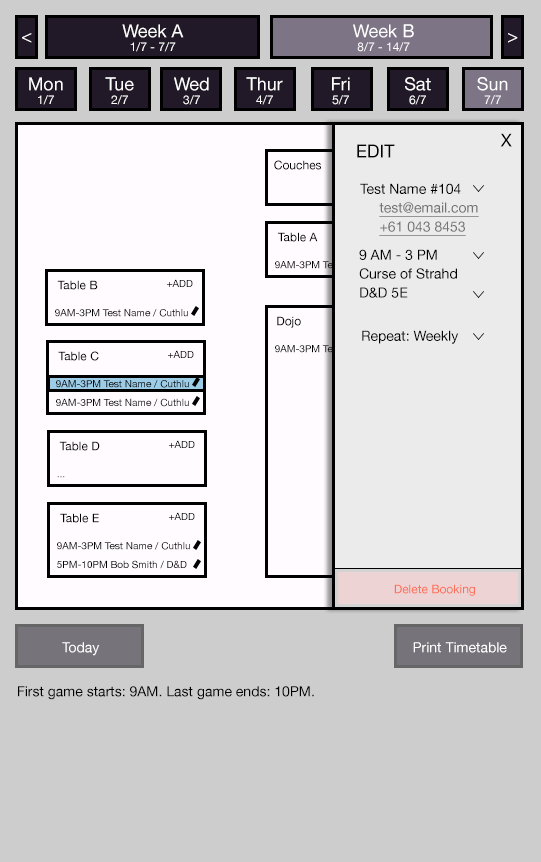
<style>
.page{position:relative;width:541px;height:862px;background:#cdcdcd}
.page>*{position:absolute;margin:0}
.t1{font:12px/13.9px "HelveticaNeue";color:#ffffff}
.t2{font:18px/13.9px "HelveticaNeue";color:#ffffff}
.t3{font:18px "HelveticaNeue";color:#ffffff}
.t4{font:18px "HelveticaNeue";color:#000000}
.t5{font:12px "HelveticaNeue";color:#000000}
.t6{font:14px/18.9px "HelveticaNeue";color:#737373;text-decoration:underline}
.t7{font:14px/18.9px "HelveticaNeue";color:#000000}
.t8{font:10px "HelveticaNeue";color:#000000}
.t9{font:14px "HelveticaNeue";color:#000000}
.t10{font:10px/18.9px "HelveticaNeue";color:#000000}
.t11{font:10px "HelveticaNeue"}
.t12{font:12px "HelveticaNeue";color:#fb7058}
.t13{font:14px "HelveticaNeue";color:#ffffff}
</style>
<div class="page">
<p class="t1" style="left:122px;top:24px;width:62px;height:28px;text-align:center"><span class="t2">Week A<br></span>1/7 - 7/7</p>
<p class="t1" style="left:353px;top:24px;width:61px;height:28px;text-align:center"><span class="t2">Week B<br></span>8/7 - 14/7</p>
<p class="t3" style="left:22px;top:33px;width:10px;height:10px">&lt;</p>
<p class="t3" style="left:508px;top:33px;width:10px;height:10px">&gt;</p>
<p class="t2" style="left:29px;top:77px;width:34px;height:28px;text-align:center">Mon<br><span class="t1">1/7</span></p>
<p class="t2" style="left:105px;top:77px;width:29px;height:28px;text-align:center">Tue<br><span class="t1">2/7</span></p>
<p class="t2" style="left:174px;top:77px;width:35px;height:28px;text-align:center">Wed<br><span class="t1">3/7</span></p>
<p class="t2" style="left:246px;top:77px;width:37px;height:28px;text-align:center">Thur<br><span class="t1">4/7</span></p>
<p class="t2" style="left:332px;top:77px;width:18px;height:28px;text-align:center">Fri<br><span class="t1">5/7</span></p>
<p class="t2" style="left:405px;top:77px;width:26px;height:28px;text-align:center">Sat<br><span class="t1">6/7</span></p>
<p class="t2" style="left:477px;top:77px;width:31px;height:28px;text-align:center">Sun<br><span class="t1">7/7</span></p>
<p class="t4" style="left:500px;top:133px;width:12px;height:14px">X</p>
<p class="t4" style="left:357px;top:144px;width:38px;height:14px">EDIT</p>
<p class="t5" style="left:274px;top:160px;width:47px;height:10px">Couches</p>
<p class="t6" style="left:360px;top:183px;width:119px;height:53px"><span class="t7">Test Name #104<br>     </span>test@email.com<br>     +61 043 8453</p>
<p class="t5" style="left:278px;top:232px;width:40px;height:10px">Table A</p>
<p class="t7" style="left:359px;top:249px;width:98px;height:49px">9 AM - 3 PM<br>Curse of Strahd<br>D&amp;D 5E</p>
<p class="t8" style="left:275px;top:261px;width:133px;height:8px">9AM-3PM Test Name / Cuthlu</p>
<p class="t5" style="left:57px;top:280px;width:41px;height:10px">Table B</p>
<p class="t8" style="left:167px;top:279px;width:26px;height:8px">+ADD</p>
<p class="t8" style="left:55px;top:309px;width:133px;height:8px">9AM-3PM Test Name / Cuthlu</p>
<p class="t5" style="left:277px;top:316px;width:24px;height:12px">Dojo</p>
<p class="t9" style="left:362px;top:330px;width:97px;height:14px">Repeat: Weekly</p>
<p class="t5" style="left:58px;top:351px;width:41px;height:10px">Table C</p>
<p class="t8" style="left:168px;top:350px;width:26px;height:8px">+ADD</p>
<p class="t8" style="left:275px;top:345px;width:133px;height:8px">9AM-3PM Test Name / Cuthlu</p>
<p class="t10" style="left:56px;top:380px;width:133px;height:27px">9AM-3PM Test Name / Cuthlu<br>9AM-3PM Test Name / Cuthlu</p>
<p class="t5" style="left:59px;top:441px;width:41px;height:10px">Table D</p>
<p class="t8" style="left:169px;top:440px;width:26px;height:8px">+ADD</p>
<p class="t11" style="left:57px;top:476px;width:8px;height:2px">...</p>
<p class="t5" style="left:60px;top:513px;width:39px;height:10px">Table E</p>
<p class="t8" style="left:169px;top:512px;width:26px;height:8px">+ADD</p>
<p class="t10" style="left:57px;top:542px;width:133px;height:27px">9AM-3PM Test Name / Cuthlu<br>5PM-10PM Bob Smith / D&amp;D</p>
<p class="t12" style="left:394px;top:584px;width:81px;height:12px">Delete Booking</p>
<p class="t13" style="left:62px;top:642px;width:38px;height:14px">Today</p>
<p class="t13" style="left:413px;top:642px;width:94px;height:11px">Print Timetable</p>
<p class="t9" style="left:18px;top:686px;width:296px;height:14px">First game starts: 9AM. Last game ends: 10PM.</p>
</div>
